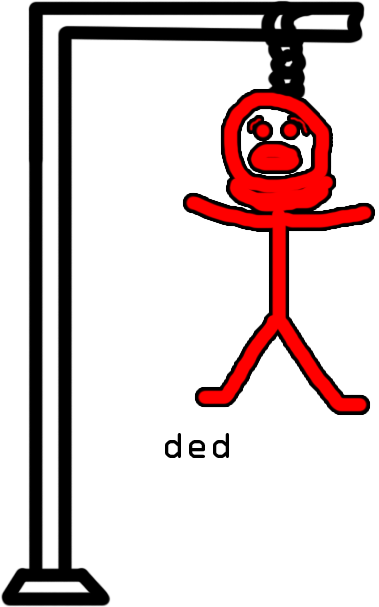
<style>
.page{position:relative;width:379px;height:607px;background:#ffffff}
.page>*{position:absolute;margin:0}
.t1{font:33.3px "OCRAStd";color:#000000}
</style>
<div class="page">
<p class="t1" style="left:165px;top:433px;width:64px;height:25px">ded</p>
</div>
